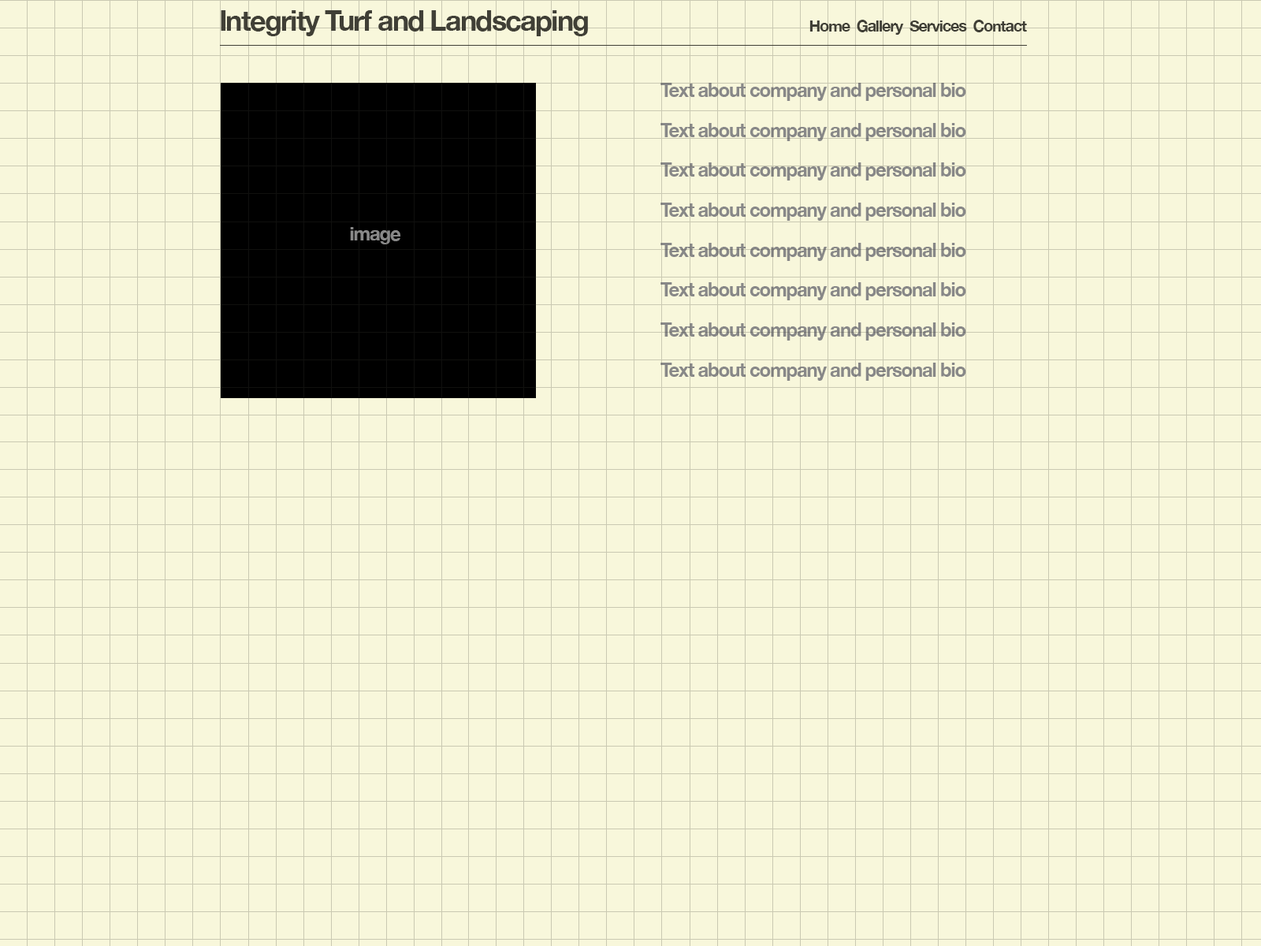
<style>
.page{position:relative;width:1261px;height:946px;background:#f8f7db}
.page>*{position:absolute;margin:0}
.t1{font:28.4px "HelveticaNeue-Bold";letter-spacing:-0.05em;color:#403f36}
.t2{font:15.4px "HelveticaNeue-Bold";letter-spacing:-0.05em;color:#403f36}
.t3{font:19.9px/39.9px "HelveticaNeue-Bold";letter-spacing:-0.05em;color:#888888;scale:0.95 1}
.t4{font:18.9px "HelveticaNeue-Bold";letter-spacing:-0.05em;color:#888888}
</style>
<div class="page">
<p class="t1" style="left:221px;top:10px;width:367px;height:26px">Integrity Turf and Landscaping</p>
<p class="t2" style="left:809px;top:20px;width:218px;height:15px">Home  Gallery  Services  Contact</p>
<p class="t3" style="left:660px;top:83px;width:306px;height:298px;text-align:center">Text about company and personal bio<br>Text about company and personal bio<br>Text about company and personal bio<br>Text about company and personal bio<br>Text about company and personal bio<br>Text about company and personal bio<br>Text about company and personal bio<br>Text about company and personal bio<br>Text about company and personal bio</p>
<p class="t4" style="left:350px;top:227px;width:51px;height:17px">image</p>
</div>
